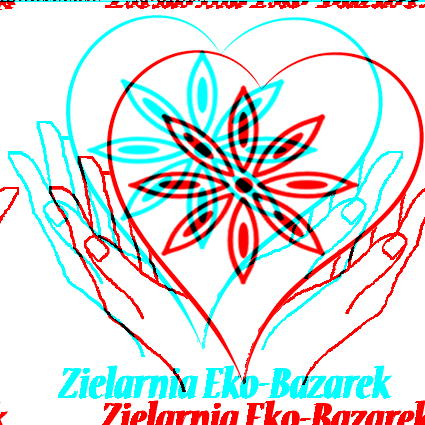
<style>
.page{position:relative;width:425px;height:425px;background:#ffffff}
.page>*{position:absolute;margin:0}
.t1{font:48px "NuevaStd-BoldCondItalic";color:#00ffff}
</style>
<div class="page">
<p class="t1" style="left:60px;top:363px;width:332px;height:33px">Zielarnia Eko-Bazarek</p>
</div>
